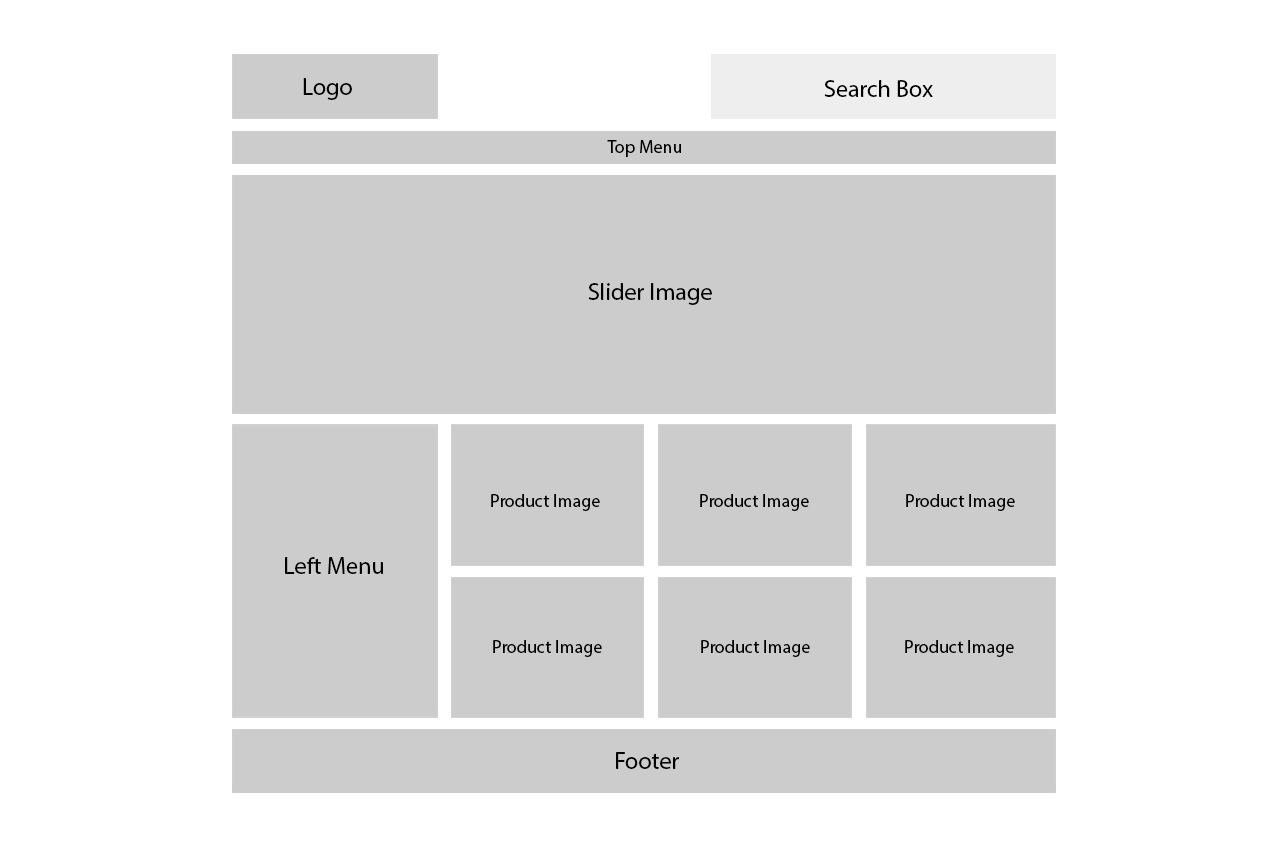
<style>
.page{position:relative;width:1280px;height:853px;background:#ffffff}
.page>*{position:absolute;margin:0}
.t1{font:24px "MyriadPro-Regular";color:#000000}
.t2{font:18px "MyriadPro-Regular";color:#000000}
</style>
<div class="page">
<p class="t1" style="left:303px;top:78px;width:49px;height:22px">Logo</p>
<p class="t1" style="left:824px;top:80px;width:109px;height:17px">Search Box</p>
<p class="t2" style="left:607px;top:140px;width:74px;height:17px">Top Menu</p>
<p class="t1" style="left:588px;top:283px;width:124px;height:22px">Slider Image</p>
<p class="t2" style="left:491px;top:494px;width:109px;height:17px">Product Image</p>
<p class="t2" style="left:700px;top:494px;width:109px;height:17px">Product Image</p>
<p class="t2" style="left:906px;top:494px;width:109px;height:17px">Product Image</p>
<p class="t1" style="left:285px;top:557px;width:98px;height:17px">Left Menu</p>
<p class="t2" style="left:493px;top:640px;width:109px;height:17px">Product Image</p>
<p class="t2" style="left:701px;top:640px;width:109px;height:17px">Product Image</p>
<p class="t2" style="left:905px;top:640px;width:109px;height:17px">Product Image</p>
<p class="t1" style="left:616px;top:752px;width:63px;height:17px">Footer</p>
</div>
